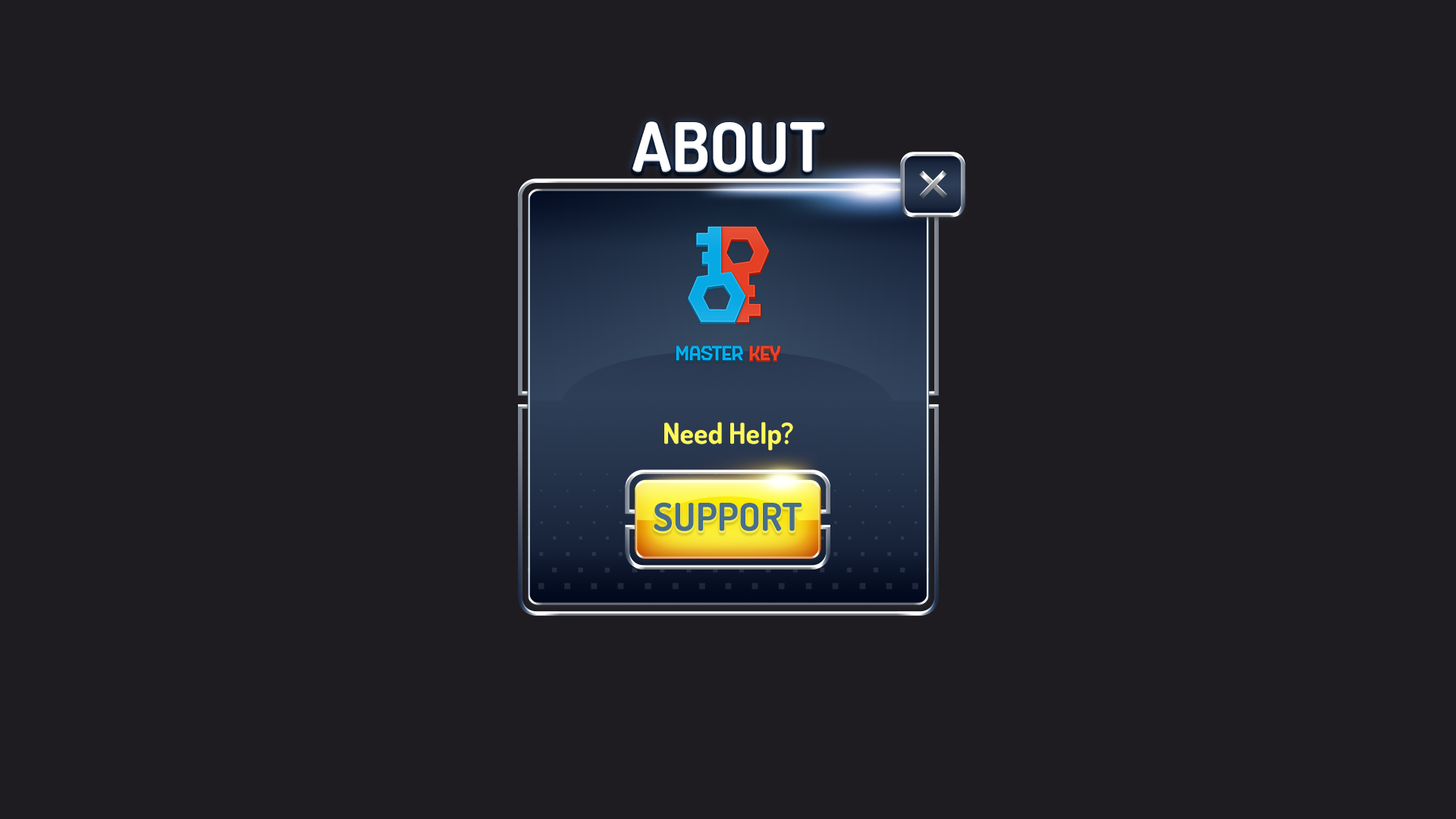
<style>
.page{position:relative;width:1456px;height:819px;background:#1e1c20}
.page>*{position:absolute;margin:0}
.t1{font:68.2px "Dosis-Bold";color:#ffffff;text-transform:uppercase}
.t2{font:28.8px "Dosis-Bold";color:#fef859}
.t3{font:38.4px "Dosis-Bold";color:#476f8b;text-transform:uppercase}
</style>
<div class="page">
<p class="t1" style="left:632px;top:121px;width:193px;height:52px">About</p>
<p class="t2" style="left:664px;top:422px;width:129px;height:28px">Need Help?</p>
<p class="t3" style="left:654px;top:502px;width:148px;height:30px">support</p>
</div>
